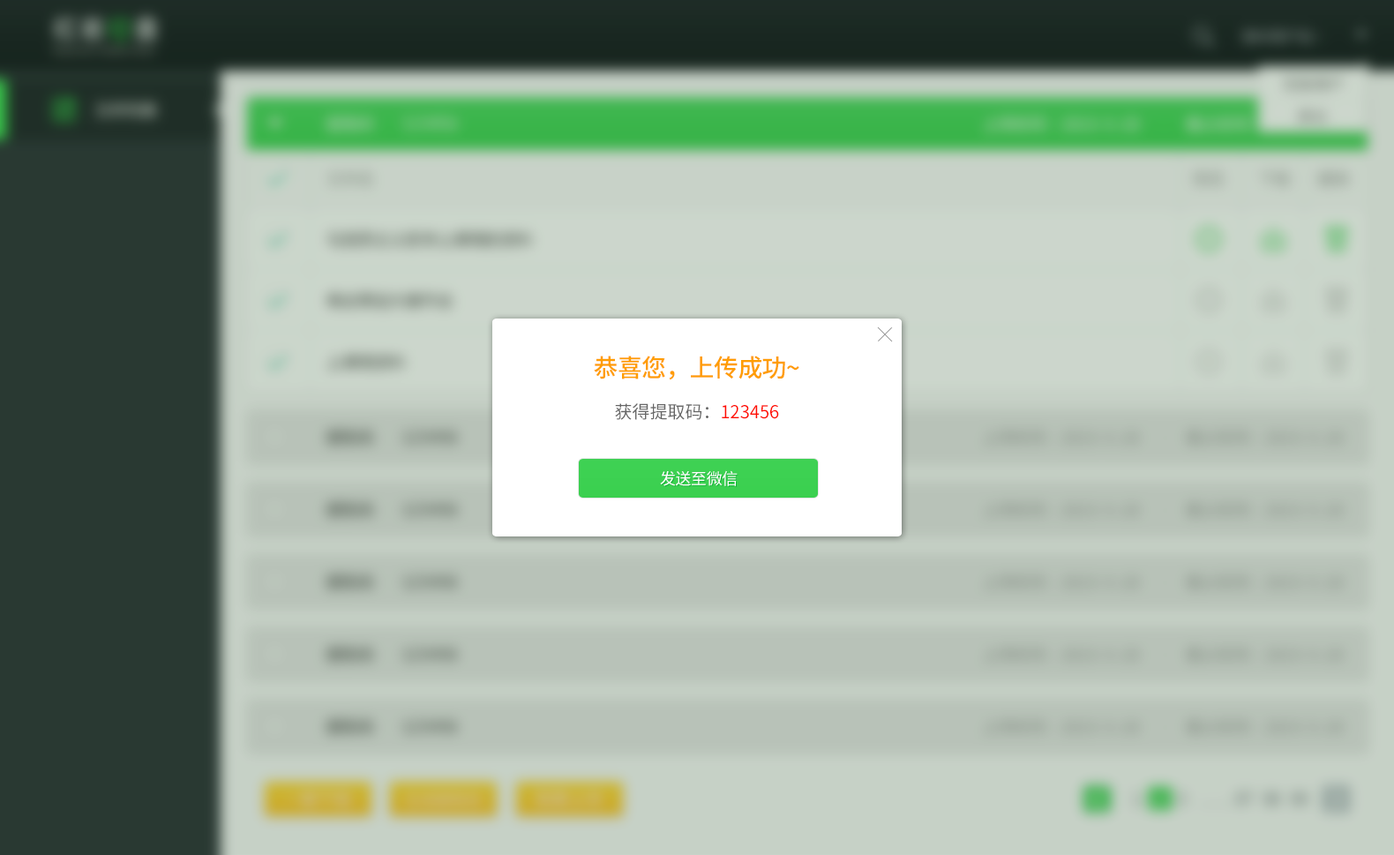
<style>
.page{position:relative;width:1394px;height:855px}
.page>*{position:absolute;margin:0}
.t1{font:24.7px "SourceHanSansCN-Medium";letter-spacing:-0.025em;color:#ff9d02}
.t2{font:17.7px "SourceHanSansCN-Regular";color:#666666}
.t3{font:17.7px "SourceHanSansCN-Regular";color:#ff0c00}
.t4{font:15.9px "SourceHanSansCN-Regular";letter-spacing:-0.025em;color:#ffffff}
</style>
<div class="page">
<p class="t1" style="left:594px;top:356px;width:206px;height:24px">恭喜您，上传成功~</p>
<p class="t2" style="left:615px;top:403px;width:164px;height:17px">获得提取码：<span class="t3">123456</span></p>
<p class="t4" style="left:660px;top:470px;width:78px;height:16px">发送至微信</p>
</div>
